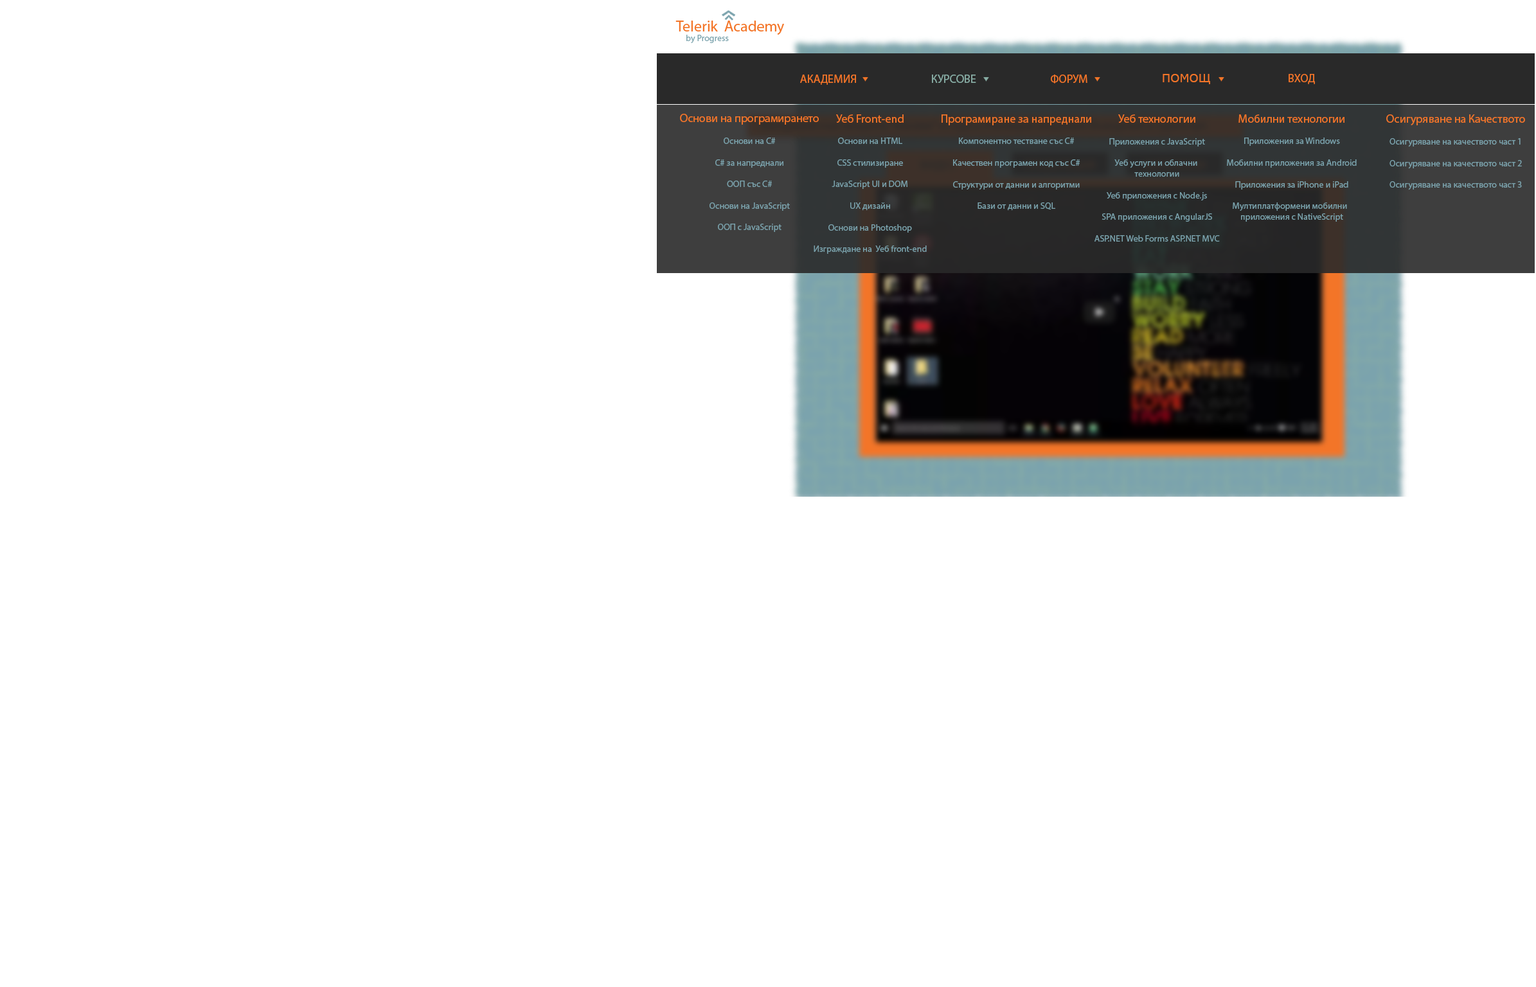
<style>
.page{position:relative;width:1536px;height:987px;background:#ffffff}
.page>*{position:absolute;margin:0}
.t1{font:11.6px "MyriadPro-Regular";color:#f37528}
.t2{font:11.6px "MyriadPro-Regular";color:#88ada5}
.t3{font:11.6px "MSReferenceSansSerif";color:#f37528}
.t4{font:9px "MyriadPro-Regular";color:#7ba3ad}
</style>
<div class="page">
<p class="t1" style="left:800px;top:75px;width:56px;height:10px">АКАДЕМИЯ</p>
<p class="t2" style="left:932px;top:75px;width:45px;height:8px">КУРСОВЕ</p>
<p class="t1" style="left:1051px;top:75px;width:37px;height:9px">ФОРУМ</p>
<p class="t3" style="left:1163px;top:74px;width:47px;height:10px">ПОМОЩ</p>
<p class="t1" style="left:1289px;top:74px;width:26px;height:10px">ВХОД</p>
<p class="t4" style="left:680px;top:114px;width:139px;height:118px;text-align:center"><span class="t1">Основи на програмирането<br><br></span>Основи на C#<br><br>C# за напреднали<br><br>ООП със C#<br><br>Основи на JavaScript<br><br>ООП с JavaScript</p>
<p class="t4" style="left:814px;top:114px;width:113px;height:140px;text-align:center"><span class="t1">Уеб Front-end<br><br></span>Основи на HTML<br><br>CSS стилизиране<br><br>JavaScript UI и DOM<br><br>UX дизайн<br><br>Основи на Photoshop<br><br>Изграждане на  Уеб front-end</p>
<p class="t4" style="left:942px;top:114px;width:150px;height:97px;text-align:center"><span class="t1">Програмиране за напреднали<br><br></span>Компонентно тестване със C#<br><br>Качествен програмен код със C#<br><br>Структури от данни и алгоритми<br><br>Бази от данни и SQL</p>
<p class="t4" style="left:1095px;top:114px;width:125px;height:128px;text-align:center"><span class="t1">Уеб технологии<br><br></span>Приложения с JavaScript<br><br>Уеб услуги и облачни <br>технологии<br><br>Уеб приложения с Node.js<br><br>SPA приложения с AngularJS<br><br>ASP.NET Web Forms ASP.NET MVC</p>
<p class="t4" style="left:1227px;top:114px;width:130px;height:108px;text-align:center"><span class="t1">Мобилни технологии<br> <br></span>Приложения за Windows<br><br>Мобилни приложения за Android<br><br>Приложения за iPhone и iPad<br><br>Мултиплатформени мобилни  <br>приложения с NativeScript</p>
<p class="t4" style="left:1387px;top:114px;width:139px;height:76px;text-align:center"><span class="t1">Осигуряване на Качеството<br> <br></span>Осигуряване на качеството част 1<br><br>Осигуряване на качеството част 2<br><br>Осигуряване на качеството част 3</p>
</div>
